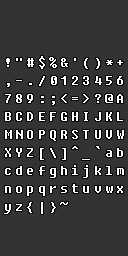
<style>
.page{position:relative;width:128px;height:256px;background:#333333}
.page>*{position:absolute;margin:0}
.t1{font:8px/18px "Fixedsys";letter-spacing:0.4em;color:#ffffff}
</style>
<div class="page">
<p class="t1" style="left:4px;top:56px;width:120px;height:158px">!"#$%&amp;'()*+<br>,-./0123456<br>789:;&lt;=&gt;?@A<br>BCDEFGHIJKL<br>MNOPQRSTUVW<br>XYZ[\]^_`ab<br>cdefghijklm<br>nopqrstuvwx<br>yz{|}~</p>
</div>
